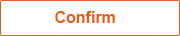
<style>
.page{position:relative;width:180px;height:36px;background:#ffffff}
.page>*{position:absolute;margin:0}
.t1{font:16px "Arial-BoldMT";color:#e85e16}
</style>
<div class="page">
<p class="t1" style="left:55px;top:11px;width:60px;height:12px">Confirm</p>
</div>
